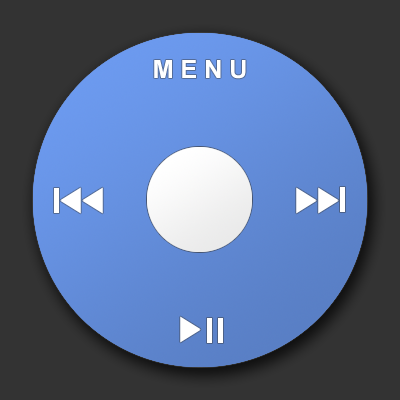
<style>
.page{position:relative;width:400px;height:400px;background:#333333}
.page>*{position:absolute;margin:0}
.t1{font:25px "Arial-BoldMT";color:#ffffff}
</style>
<div class="page">
<p class="t1" style="left:154px;top:60px;width:92px;height:19px">M E N U</p>
</div>
